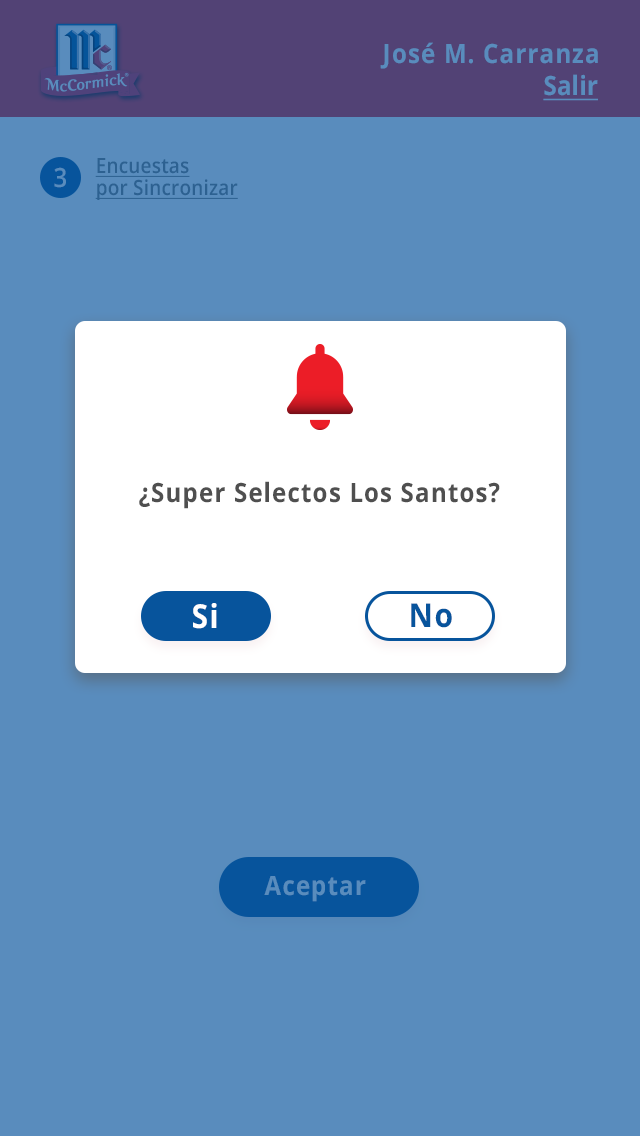
<style>
.page{position:relative;width:640px;height:1136px;background:#598cbd}
.page>*{position:absolute;margin:0}
.t1{font:26.4px "OpenSans-Bold";letter-spacing:0.05em;color:#598cbd;scale:0.91 1}
.t2{font:26.4px "OpenSans-Bold";letter-spacing:0.01em;color:#598cbd;text-decoration:underline;scale:0.91 1}
.t3{font:20.9px/22px "OpenSans-SemiBold";letter-spacing:0.01em;color:#2d6191;text-decoration:underline;scale:0.91 1}
.t4{font:26.4px "OpenSans-SemiBold";letter-spacing:0.05em;color:#598cbd;scale:0.91 1}
.t5{font:26.4px "OpenSans-Bold";letter-spacing:0.05em;color:#4f4f4f;scale:0.91 1}
.t6{font:33px "OpenSans-Bold";letter-spacing:0.05em;color:#ffffff;scale:0.91 1}
.t7{font:33px "OpenSans-Bold";letter-spacing:0.05em;color:#07549c;scale:0.91 1}
</style>
<div class="page">
<p class="t1" style="left:380px;top:42px;width:218px;height:27px">José M. Carranza</p>
<p class="t2" style="left:543px;top:74px;width:55px;height:27px">Salir</p>
<p class="t3" style="left:95px;top:158px;width:143px;height:42px">Encuestas<br>por Sincronizar</p>
<p class="t4" style="left:54px;top:167px;width:12px;height:21px">3</p>
<p class="t5" style="left:139px;top:481px;width:361px;height:28px">¿Super Selectos Los Santos?</p>
<p class="t6" style="left:193px;top:603px;width:24px;height:26px">Si</p>
<p class="t7" style="left:411px;top:603px;width:41px;height:25px">No</p>
<p class="t1" style="left:264px;top:876px;width:102px;height:26px">Aceptar</p>
</div>
